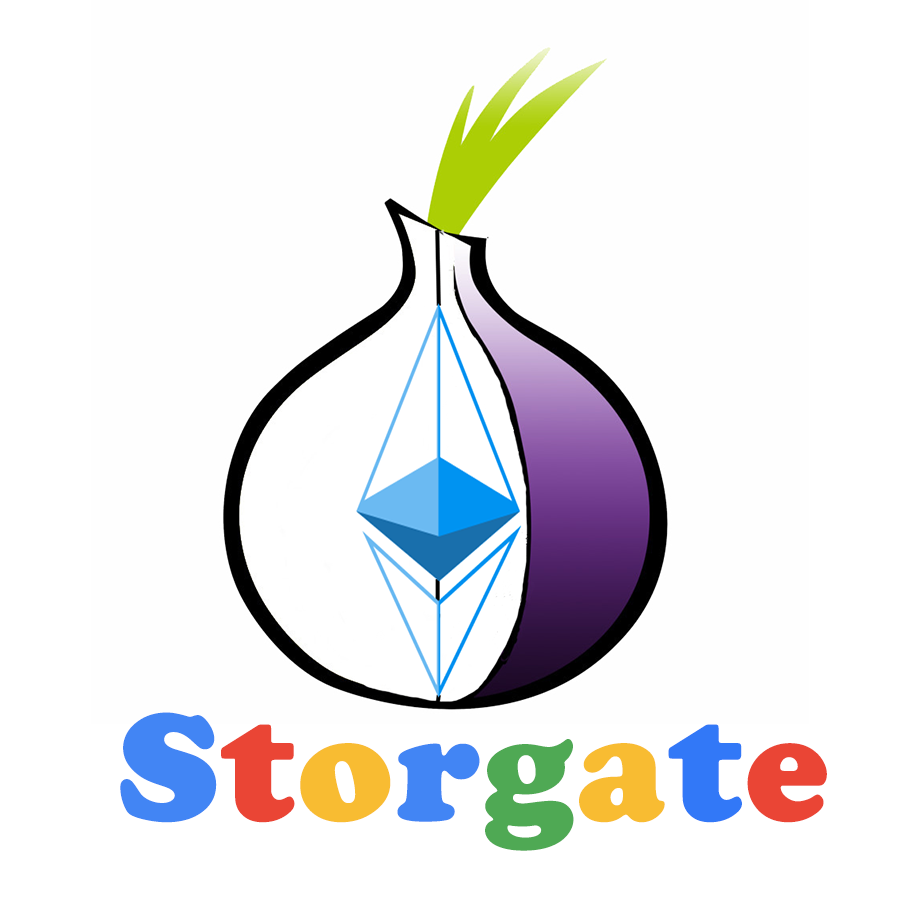
<style>
.page{position:relative;width:900px;height:900px;background:#fefefe}
.page>*{position:absolute;margin:0}
.t1{font:158px "CooperBlack";letter-spacing:0.02em;color:#4285f4}
.t2{font:158px "CooperBlack";letter-spacing:0.02em;color:#ea4535}
.t3{font:158px "CooperBlack";letter-spacing:0.02em;color:#f8bc32}
.t4{font:158px "CooperBlack";letter-spacing:0.02em;color:#4fa954}
.t5{font:158px "CooperBlack";letter-spacing:0.02em;color:#3278f7}
</style>
<div class="page">
<p class="t1" style="left:120px;top:712px;width:707px;height:139px">S<span class="t2">t</span><span class="t3">o</span>r<span class="t4">g</span><span class="t3">a</span><span class="t5">t</span><span class="t2">e</span></p>
</div>
